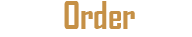
<style>
.page{position:relative;width:192px;height:37px;background:#ffffff}
.page>*{position:absolute;margin:0}
.t1{font:36px "AgencyFB-Bold";color:#c59046}
.t2{font:36px "AgencyFB-Bold";color:#ffffff}
</style>
<div class="page">
<p class="t1" style="left:0px;top:1px;width:135px;height:34px"><span class="t2">Easy </span>Order</p>
</div>
